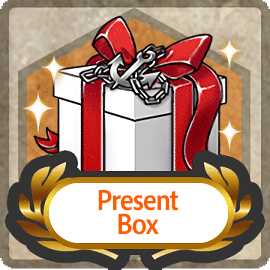
<style>
.page{position:relative;width:270px;height:270px}
.page>*{position:absolute;margin:0}
.t1{font:30px/24px "AdobeClean-Bold";letter-spacing:-0.04em;color:#ff5d00;scale:0.9 1}
</style>
<div class="page">
<p class="t1" style="left:98px;top:190px;width:80px;height:45px;text-align:center">Present<br>Box</p>
</div>
